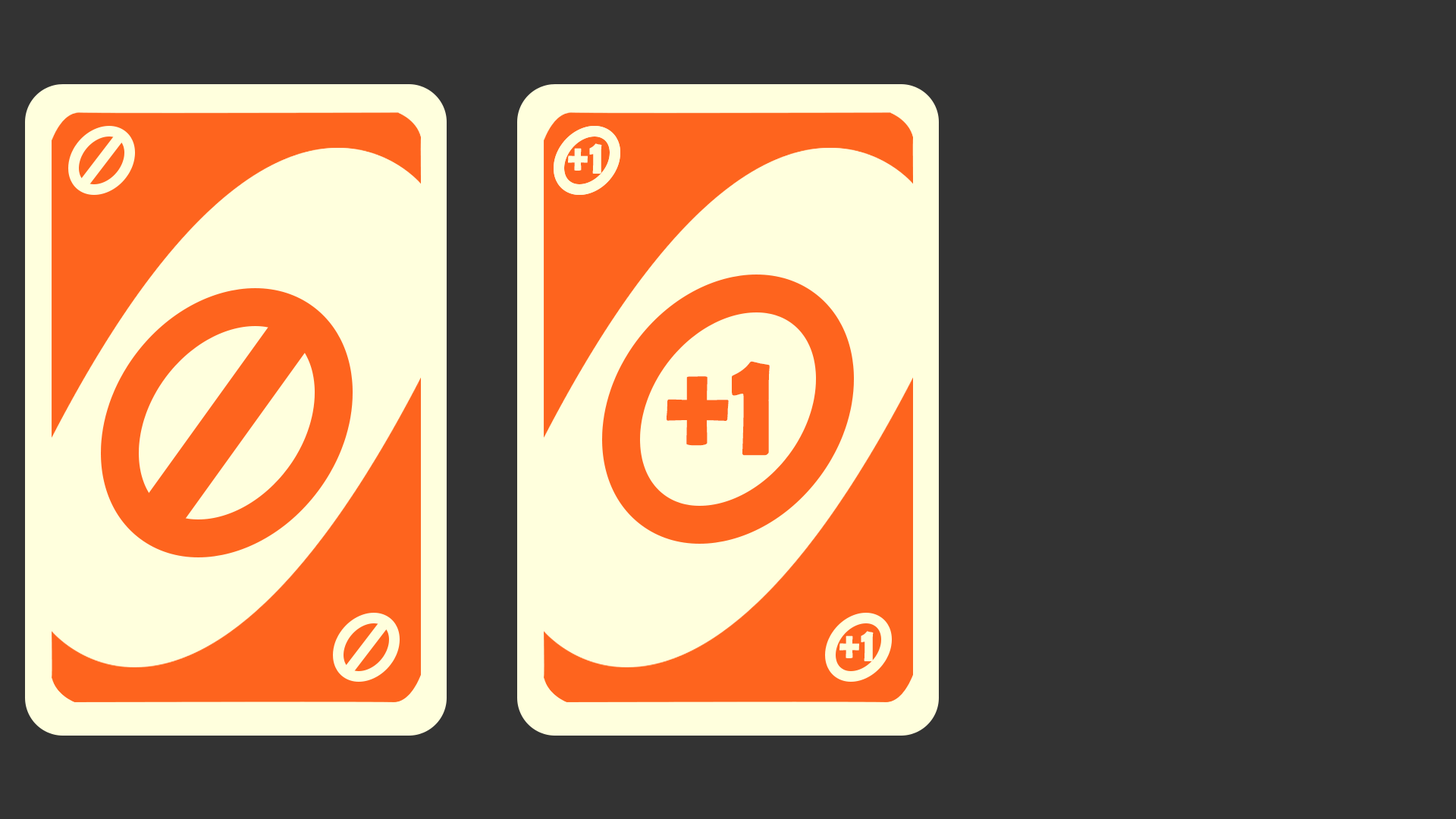
<style>
.page{position:relative;width:1456px;height:819px;background:#333333}
.page>*{position:absolute;margin:0}
.t1{font:48.5px "BerlinSansFBDemi-Bold";color:#ffffdd;scale:1.25 1}
.t2{font:151.7px "BerlinSansFBDemi-Bold";color:#fe641e;scale:1.25 1}
</style>
<div class="page">
<p class="t1" style="left:568px;top:143px;width:34px;height:31px">+1</p>
<p class="t2" style="left:667px;top:361px;width:103px;height:95px">+1</p>
<p class="t1" style="left:839px;top:631px;width:35px;height:30px">+1</p>
</div>
